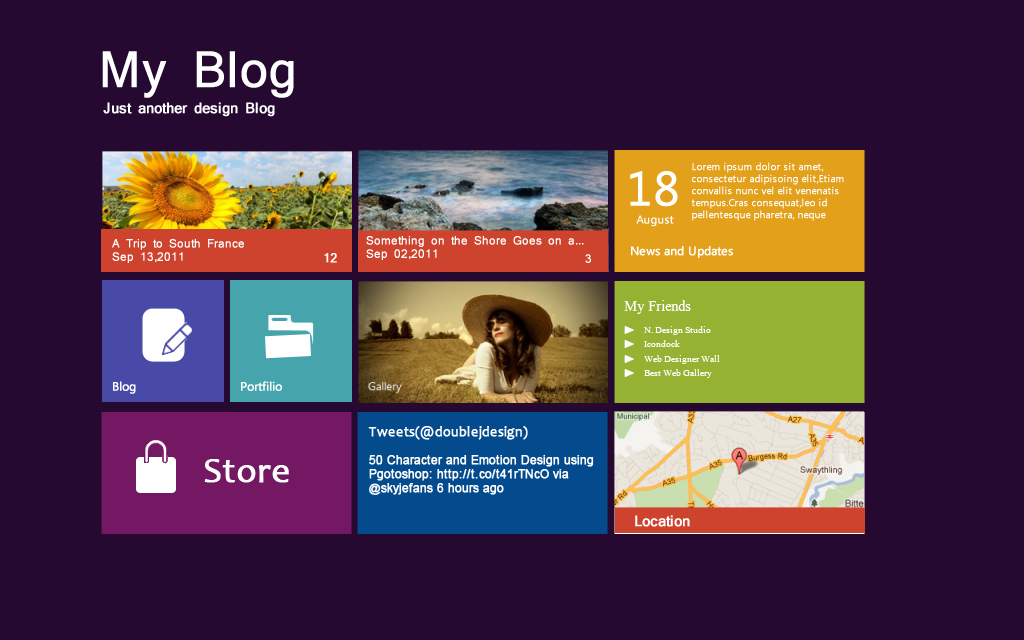
<style>
.page{position:relative;width:1024px;height:640px;background:#250931}
.page>*{position:absolute;margin:0}
.t1{font:48px "Mangal";color:#ffffff;font-weight:bold}
.t2{font:14px "Mangal";color:#ffffff;font-weight:bold}
.t3{font:48px "Ebrima";color:#ffffff;font-weight:bold}
.t4{font:10px "Ebrima";color:#ffffff;font-weight:bold}
.t5{font:11px "Ebrima";color:#ffffff;font-weight:bold}
.t6{font:11px "Mangal";color:#ffffff;font-weight:bold}
.t7{font:12px "Ebrima";color:#ffffff;font-weight:bold}
.t8{font:12px "Mangal";color:#ffffff;font-weight:bold}
.t9{font:18px "Aparajita";color:#ffffff}
.t10{font:12px "Aparajita";color:#ffffff}
.t11{font:11.5px "ArialMT";color:#ffffff;font-weight:bold}
.t12{font:14px "Candara";color:#ffffff;font-weight:bold}
.t13{font:36px "Candara";color:#ffffff;font-weight:bold}
</style>
<div class="page">
<p class="t1" style="left:102px;top:51px;width:192px;height:47px">My Blog</p>
<p class="t2" style="left:103px;top:102px;width:172px;height:15px">Just another design Blog</p>
<p class="t3" style="left:630px;top:171px;width:48px;height:36px">18</p>
<p class="t4" style="left:691px;top:162px;width:153px;height:59px">Lorem ipsum dolor sit amet,<br>consectetur adipisoing elit,Etiam<br>convallis nunc vel elit venenatis<br>tempus.Cras consequat,leo id <br>pellentesque pharetra, neque</p>
<p class="t5" style="left:636px;top:215px;width:38px;height:12px">August</p>
<p class="t6" style="left:112px;top:239px;width:132px;height:24px">A Trip to South France<br>Sep 13,2011</p>
<p class="t6" style="left:366px;top:236px;width:218px;height:24px">Something on the Shore Goes on a...<br>Sep 02,2011</p>
<p class="t7" style="left:631px;top:246px;width:102px;height:12px">News and Updates</p>
<p class="t8" style="left:324px;top:253px;width:13px;height:10px">12</p>
<p class="t6" style="left:585px;top:254px;width:6px;height:9px">3</p>
<p class="t9" style="left:624px;top:300px;width:67px;height:14px">My Friends</p>
<p class="t10" style="left:643px;top:326px;width:77px;height:52px">N. Design Studio<br>Icondock<br>Web Designer Wall<br>Best Web Gallery</p>
<p class="t7" style="left:113px;top:381px;width:23px;height:13px">Blog</p>
<p class="t7" style="left:241px;top:381px;width:41px;height:10px">Portfilio</p>
<p class="t11" style="left:368px;top:426px;width:226px;height:69px"><span class="t12">Tweets(@doublejdesign)<br><br></span>50 Character and Emotion Design using<br>Pgotoshop: http://t.co/t41rTNcO via<br>@skyjefans 6 hours ago</p>
<p class="t13" style="left:204px;top:459px;width:85px;height:24px">Store</p>
<p class="t2" style="left:635px;top:515px;width:55px;height:12px">Location</p>
</div>
